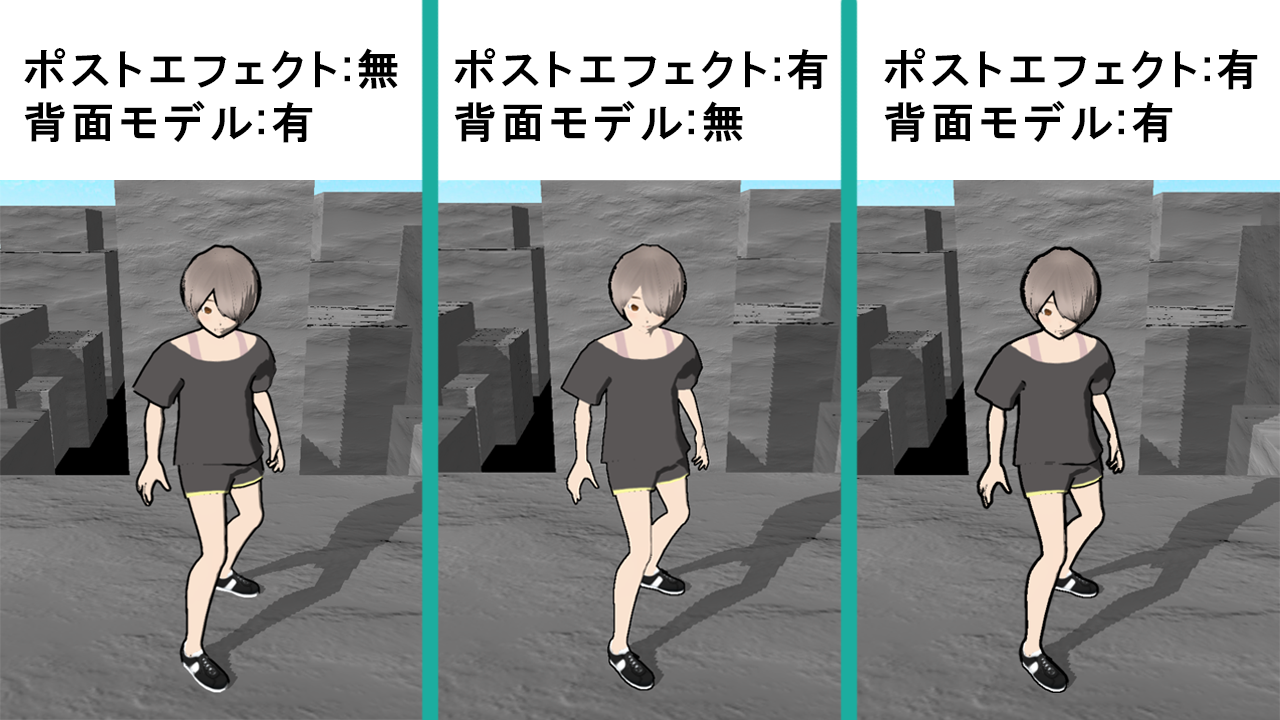
<style>
.page{position:relative;width:1280px;height:720px;background:#ffffff}
.page>*{position:absolute;margin:0}
.t1{font:43.8px/52.5px "HGPGothicE";letter-spacing:0.1em;color:#000000}
</style>
<div class="page">
<p class="t1" style="left:24px;top:48px;width:374px;height:95px">ポストエフェクト:無<br>背面モデル:有</p>
<p class="t1" style="left:454px;top:48px;width:374px;height:95px">ポストエフェクト:有<br>背面モデル:無</p>
<p class="t1" style="left:884px;top:48px;width:374px;height:95px">ポストエフェクト:有<br>背面モデル:有</p>
</div>
